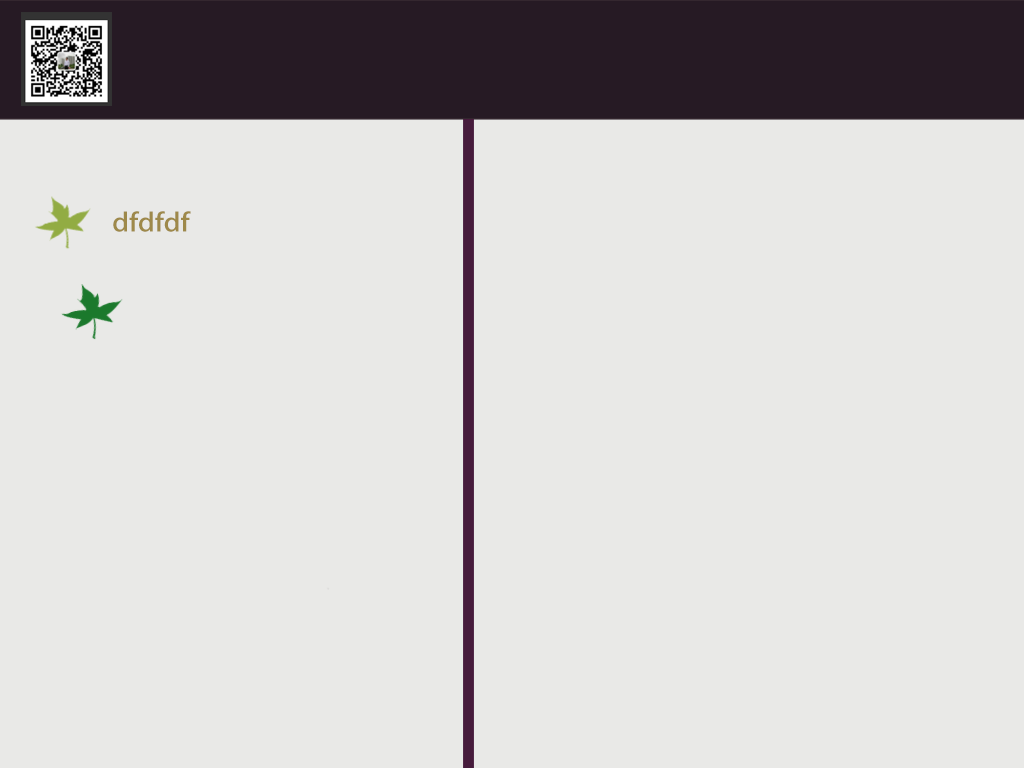
<style>
.page{position:relative;width:1024px;height:768px;background:#e9e9e7}
.page>*{position:absolute;margin:0}
.t1{font:24.8px "AdobeHeitiStd-Regular";color:#9e894a;scale:1.11 1}
</style>
<div class="page">
<p class="t1" style="left:113px;top:211px;width:78px;height:21px">dfdfdf</p>
</div>
